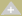
<style>
.page{position:relative;width:22px;height:16px;background:#bfba84}
.page>*{position:absolute;margin:0}
.t1{font:13px "ArialMT";color:#ffffff}
</style>
<div class="page">
<p class="t1" style="left:7px;top:6px;width:7px;height:7px">+</p>
</div>
